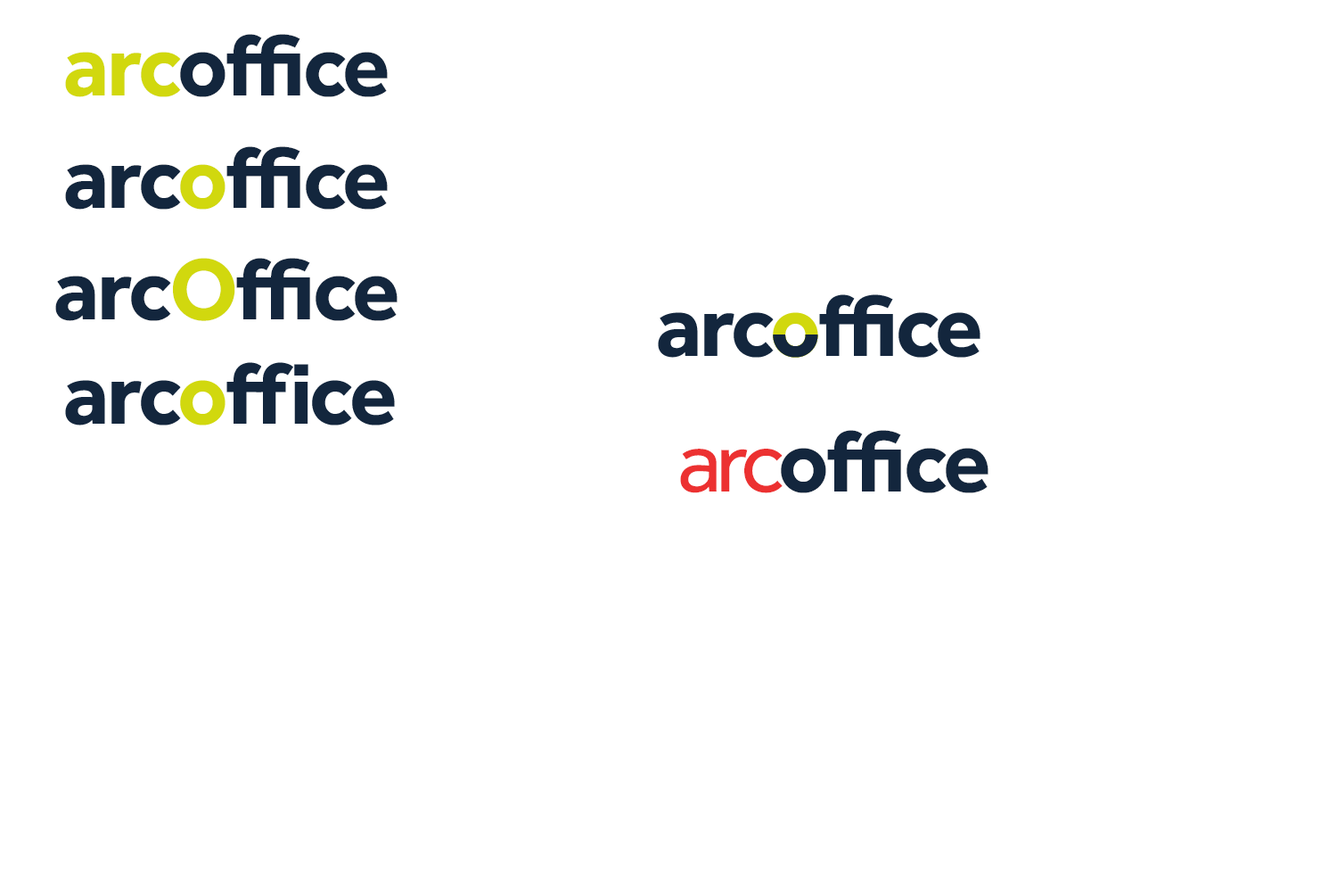
<style>
.page{position:relative;width:1337px;height:892px;background:#ffffff}
.page>*{position:absolute;margin:0}
.t1{font:89.2px "Effra-Bold";letter-spacing:-0.03em;color:#13263d}
.t2{font:89.2px "Effra-Bold";letter-spacing:-0.03em;color:#d1d80e}
.t3{font:89.2px "Effra-Regular";letter-spacing:-0.075em;color:#ec3131}
</style>
<div class="page">
<p class="t1" style="left:65px;top:34px;width:323px;height:63px"><span class="t2">arc</span>office</p>
<p class="t1" style="left:65px;top:146px;width:323px;height:64px">arc<span class="t2">o</span>ffice</p>
<p class="t1" style="left:55px;top:258px;width:343px;height:63px">arc<span class="t2">O</span>ffice</p>
<p class="t1" style="left:680px;top:430px;width:309px;height:63px"><span class="t3">arc</span>office</p>
</div>
